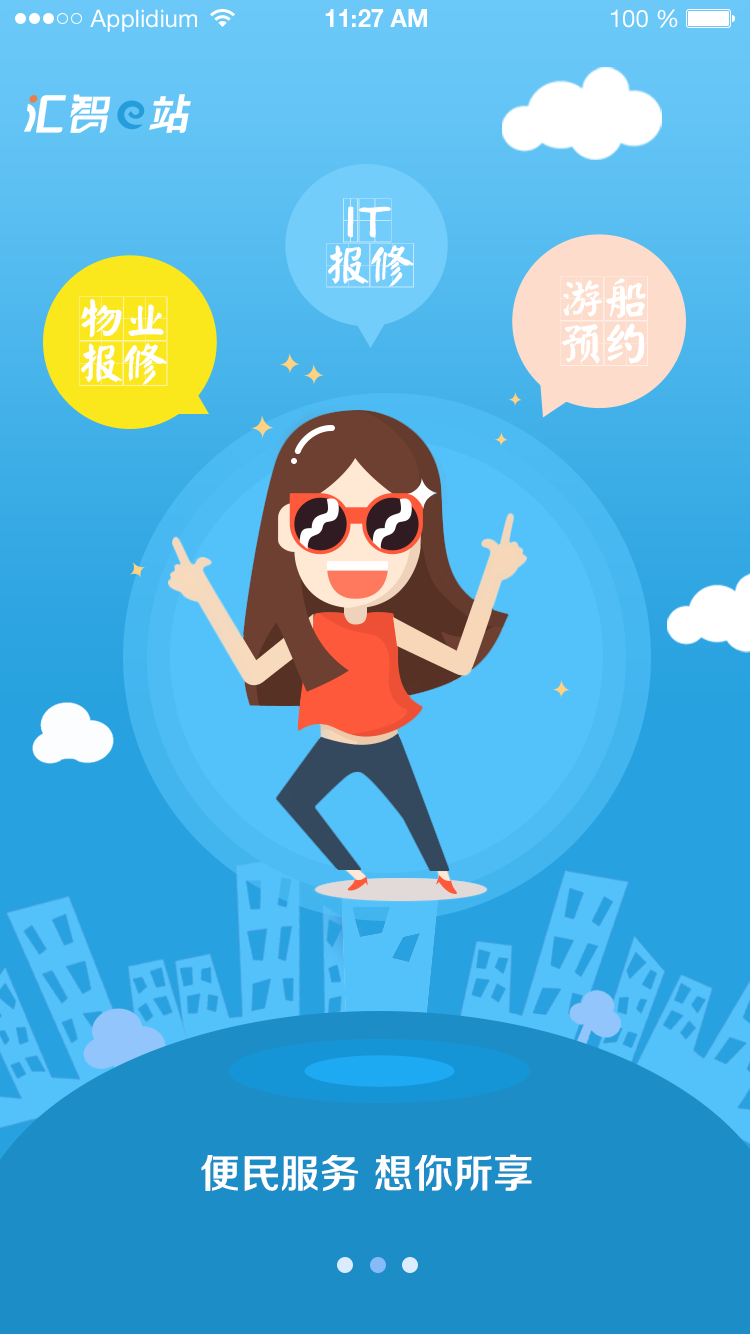
<style>
.page{position:relative;width:750px;height:1334px}
.page>*{position:absolute;margin:0}
.t1{font:24px "HelveticaNeueLTStd-Roman";color:#ffffff}
.t2{font:24px "HelveticaNeueLTStd-Bd";color:#ffffff}
.t3{font:44.1px/45px "YankaigungEG-Ultra-GB";color:#ffffff;text-transform:uppercase}
.t4{font:40px "FZZZHONGJW--GB1-0";color:#ffffff;text-transform:uppercase}
</style>
<div class="page">
<p class="t1" style="left:90px;top:9px;width:107px;height:23px">Applidium</p>
<p class="t2" style="left:325px;top:9px;width:102px;height:18px">11:27 AM</p>
<p class="t1" style="left:611px;top:9px;width:67px;height:19px">100 %</p>
<p class="t3" style="left:326px;top:198px;width:88px;height:90px">IT<br>报修</p>
<p class="t3" style="left:560px;top:276px;width:88px;height:90px">游船<br>预约</p>
<p class="t3" style="left:79px;top:296px;width:89px;height:90px">物业<br>报修</p>
<p class="t4" style="left:201px;top:1154px;width:331px;height:37px">便民服务 想你所享</p>
</div>
